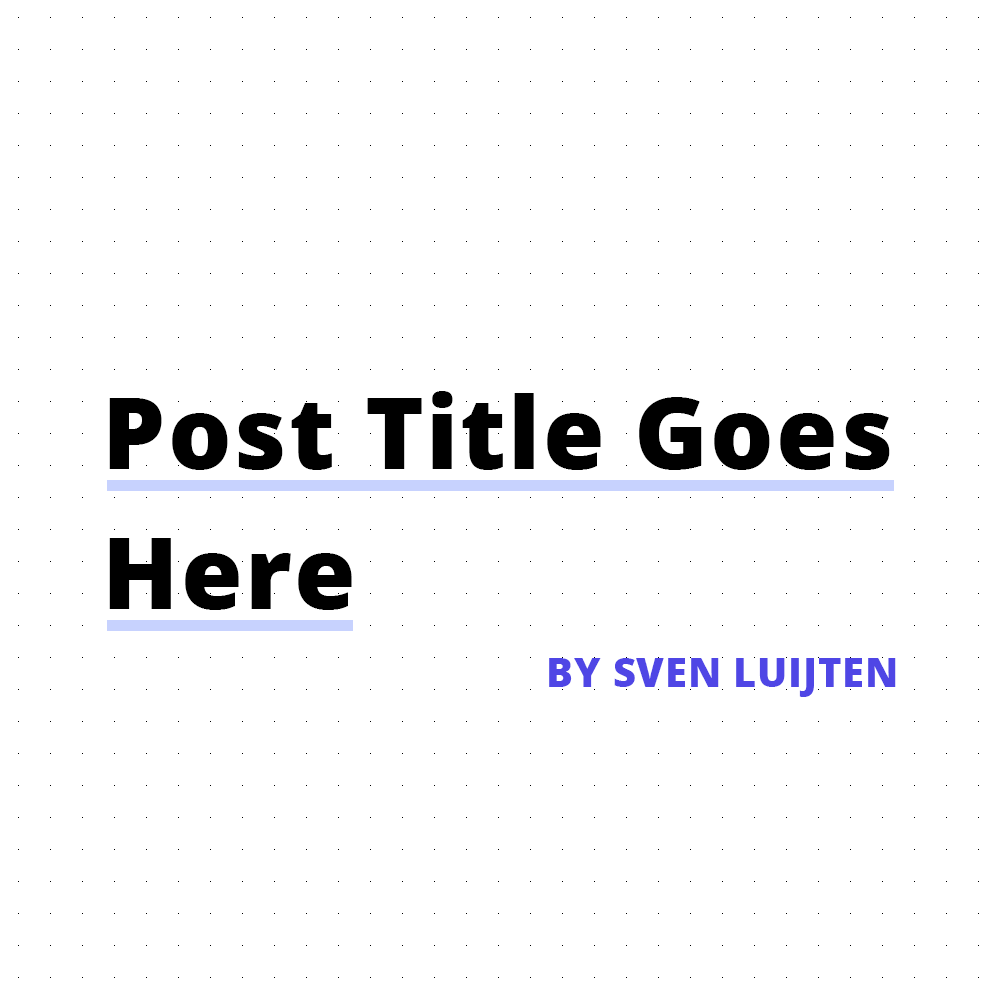
<style>
.page{position:relative;width:1000px;height:1000px;background:#ffffff}
.page>*{position:absolute;margin:0}
.t1{font:100px/140px "OpenSans-Extrabold";letter-spacing:0.02em;color:#000000}
.t2{font:40px "OpenSans-Extrabold";letter-spacing:0.02em;color:#4f46e5}
</style>
<div class="page">
<p class="t1" style="left:109px;top:391px;width:781px;height:219px">Post Title Goes<br>Here</p>
<p class="t2" style="left:549px;top:658px;width:347px;height:39px">BY SVEN LUIJTEN</p>
</div>
